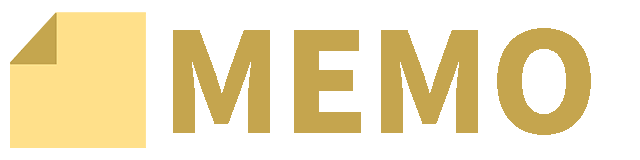
<style>
.page{position:relative;width:640px;height:160px;background:#ffffff}
.page>*{position:absolute;margin:0}
.t1{font:138px "NotoSansTC-Black";color:#c5a54e}
</style>
<div class="page">
<p class="t1" style="left:173px;top:28px;width:418px;height:107px">MEMO</p>
</div>
